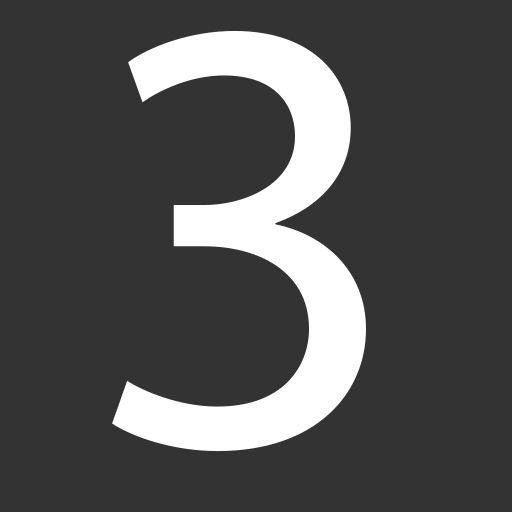
<style>
.page{position:relative;width:512px;height:512px;background:#333333}
.page>*{position:absolute;margin:0}
.t1{font:625px "MyriadPro-Regular";color:#ffffff}
</style>
<div class="page">
<p class="t1" style="left:112px;top:30px;width:254px;height:422px">3</p>
</div>
